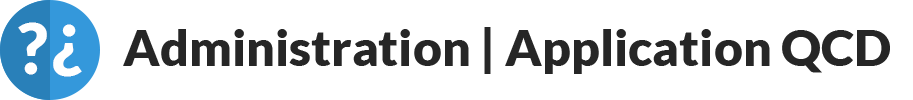
<style>
.page{position:relative;width:913px;height:100px;background:#ffffff}
.page>*{position:absolute;margin:0}
.t1{font:70px "Lato-Black";color:#ffffff}
.t2{font:50px "Lato-Black";color:#262626}
</style>
<div class="page">
<p class="t1" style="left:18px;top:22px;width:29px;height:53px">?</p>
<p class="t1" style="left:53px;top:24px;width:29px;height:53px;rotate:180deg">?</p>
<p class="t2" style="left:123px;top:27px;width:767px;height:47px">Administration | Application QCD</p>
</div>
